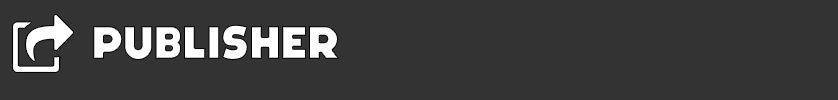
<style>
.page{position:relative;width:838px;height:100px;background:#333333}
.page>*{position:absolute;margin:0}
.t1{font:48px "Boldfinger";color:#ffffff}
</style>
<div class="page">
<p class="t1" style="left:93px;top:24px;width:246px;height:36px">PUBLISHER</p>
</div>
